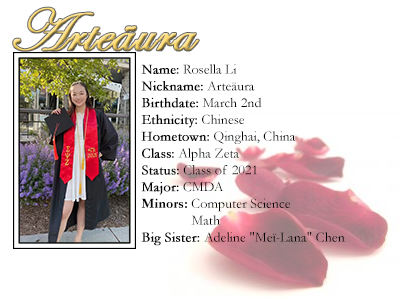
<style>
.page{position:relative;width:400px;height:300px;background:#ffffff}
.page>*{position:absolute;margin:0}
.t1{font:60px "EdwardianScriptITC";font-weight:bold}
.t2{font:14px "Garamond";color:#000000}
.t3{font:14px "Garamond";color:#000000;font-weight:bold}
.t4{font:14px "Garamond-Bold";color:#000000}
</style>
<div class="page">
<p class="t1" style="left:13px;top:7px;width:186px;height:44px">Arteäura</p>
<p class="t2" style="left:141px;top:64px;width:204px;height:182px"><span class="t3">Name:</span> Rosella Li<br><span class="t3">Nickname:</span> Arteäura<br><span class="t3">Birthdate:</span> March 2nd<br><span class="t3">Ethnicity:</span> Chinese<br><span class="t3">Hometown:</span> Qinghai, China<br><span class="t3">Class:</span> Alpha Zeta<br><span class="t3">Status:</span> Class of 2021<br><span class="t3">Major:</span> CMDA<br><span class="t4">Minors:</span> Computer Science<br>     Math<br><span class="t3">Big Sister: </span>Adeline "Meï-Lana" Chen</p>
</div>
